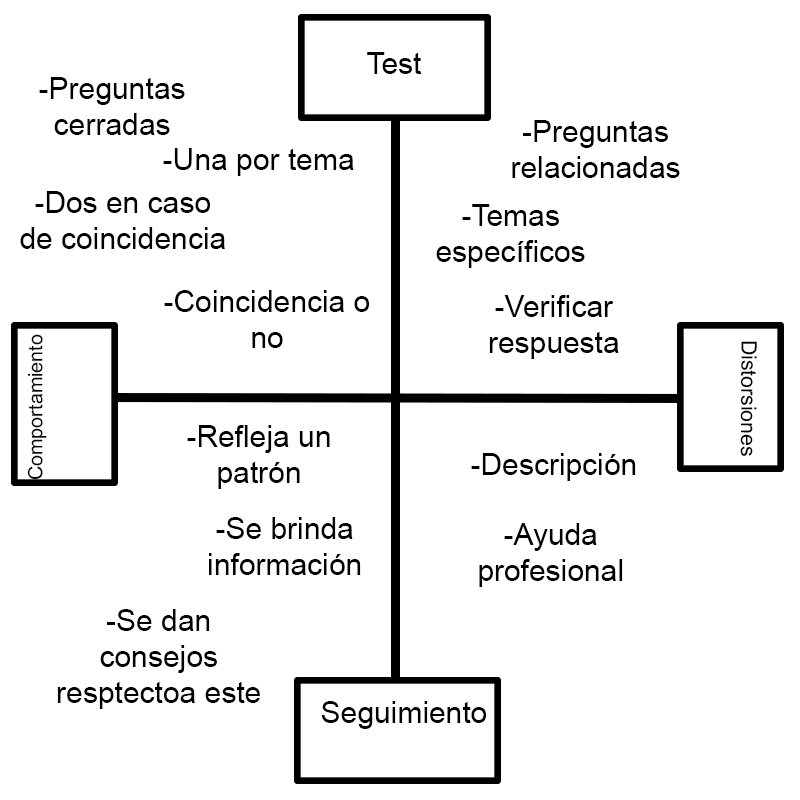
<style>
.page{position:relative;width:800px;height:800px;background:#ffffff}
.page>*{position:absolute;margin:0}
.t1{font:30px "ArialMT";color:#000000}
.t2{font:19.8px "ArialMT";color:#000000}
.t3{font:21.2px "ArialMT";color:#000000}
</style>
<div class="page">
<p class="t1" style="left:367px;top:52px;width:54px;height:22px">Test</p>
<p class="t1" style="left:39px;top:77px;width:146px;height:58px;text-align:center">-Preguntas cerradas</p>
<p class="t1" style="left:512px;top:120px;width:168px;height:58px;text-align:center">-Preguntas relacionadas</p>
<p class="t1" style="left:163px;top:148px;width:191px;height:28px">-Una por tema</p>
<p class="t1" style="left:20px;top:191px;width:205px;height:58px;text-align:center">-Dos en caso de coincidencia</p>
<p class="t1" style="left:436px;top:204px;width:149px;height:64px;text-align:center">-Temas específicos</p>
<p class="t1" style="left:164px;top:290px;width:206px;height:58px;text-align:center">-Coincidencia o no</p>
<p class="t1" style="left:489px;top:295px;width:130px;height:64px;text-align:center">-Verificar respuesta</p>
<p class="t2" style="left:27px;top:334px;width:20px;height:146px;rotate:-90deg">Comportamiento</p>
<p class="t3" style="left:740px;top:341px;width:17px;height:115px;rotate:90deg">Distorsiones</p>
<p class="t1" style="left:187px;top:425px;width:143px;height:64px;text-align:center">-Refleja un patrón</p>
<p class="t1" style="left:471px;top:453px;width:165px;height:28px">-Descripción</p>
<p class="t1" style="left:209px;top:517px;width:152px;height:58px;text-align:center">-Se brinda información</p>
<p class="t1" style="left:479px;top:523px;width:144px;height:64px;text-align:center">-Ayuda profesional</p>
<p class="t1" style="left:57px;top:609px;width:203px;height:100px;text-align:center">-Se dan consejos resptectoa este</p>
<p class="t1" style="left:321px;top:701px;width:166px;height:28px">Seguimiento</p>
</div>
